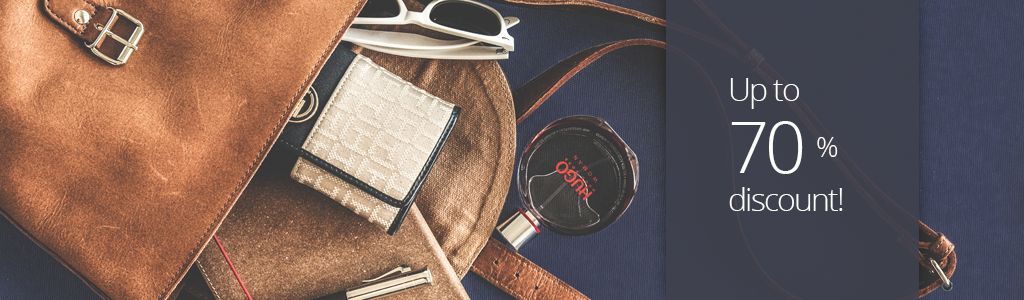
<style>
.page{position:relative;width:1024px;height:300px}
.page>*{position:absolute;margin:0}
.t1{font:32px "OpenSans-Light";letter-spacing:-0.06em;color:#fefefb}
.t2{font:72px/72px "OpenSans-Light";letter-spacing:-0.06em;color:#fefefb}
.t3{font:48px/72px "OpenSans-Light";letter-spacing:-0.06em;color:#fefefb}
</style>
<div class="page">
<p class="t1" style="left:729px;top:78px;width:114px;height:133px">Up to<br><span class="t2">70 </span><span class="t3">%<br></span>discount!</p>
</div>
